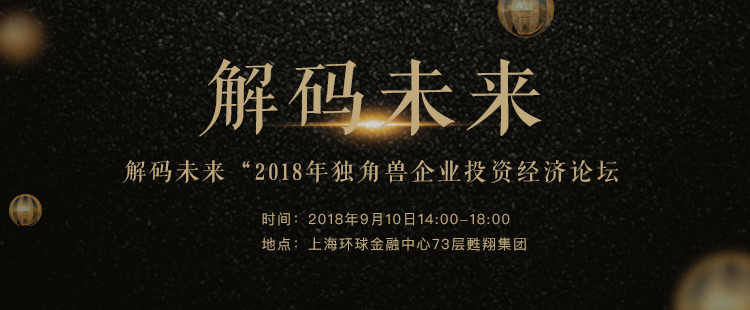
<style>
.page{position:relative;width:750px;height:310px}
.page>*{position:absolute;margin:0}
.t1{font:79.9px "FZQKBYSJW--GB1-0";letter-spacing:0.1em;color:#bfa97c}
.t2{font:23.9px "FZQKBYSJW--GB1-0";letter-spacing:0.1em;color:#bfa97c}
.t3{font:14px "PingFangSC-Regular";letter-spacing:0.1em;color:#bfa97c}
</style>
<div class="page">
<p class="t1" style="left:199px;top:58px;width:343px;height:79px">解码未来</p>
<p class="t2" style="left:122px;top:160px;width:497px;height:23px">解码未来“2018年独角兽企业投资经济论坛</p>
<p class="t3" style="left:262px;top:212px;width:248px;height:14px">时间：2018年9月10日14:00-18:00</p>
<p class="t3" style="left:262px;top:237px;width:264px;height:14px">地点：上海环球金融中心73层甦翔集团</p>
</div>
